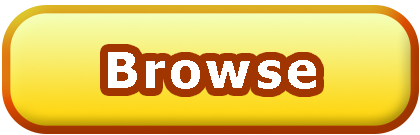
<style>
.page{position:relative;width:420px;height:135px}
.page>*{position:absolute;margin:0}
.t1{font:50px "Tahoma-Bold";letter-spacing:0.1em;color:#ffffff}
</style>
<div class="page">
<p class="t1" style="left:108px;top:52px;width:208px;height:37px">Browse</p>
</div>
